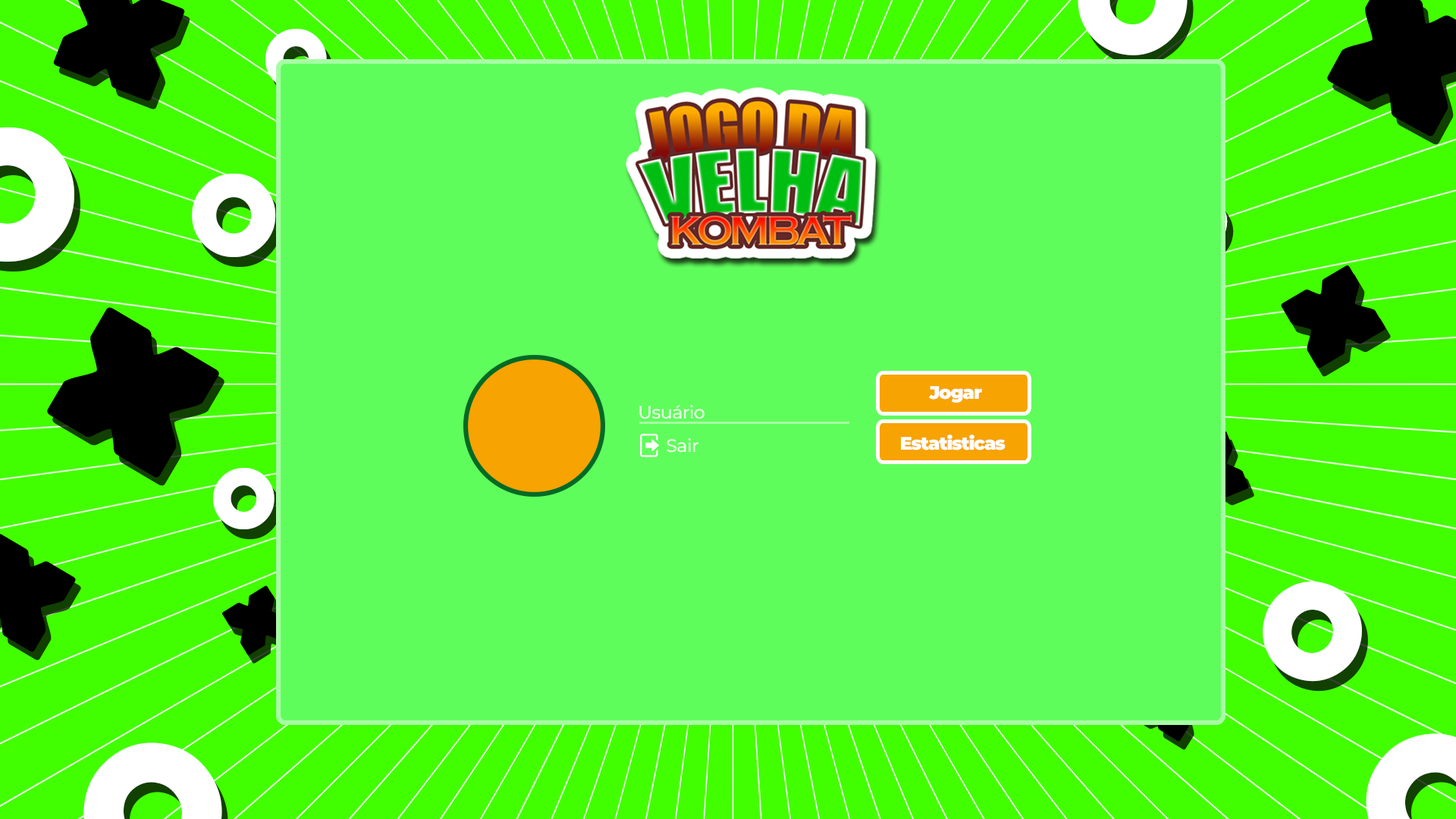
<style>
.page{position:relative;width:1456px;height:819px;background:#5ffd5b}
.page>*{position:absolute;margin:0}
.t1{font:88.2px "Bauhaus93";letter-spacing:-0.025em}
.t2{font:119px "Bauhaus93";letter-spacing:-0.025em;color:#ffffff}
.t3{font:154.7px "BerlinSansFB-Bold";letter-spacing:-0.025em;color:#000000}
.t4{font:256px "BerlinSansFB-Bold";letter-spacing:-0.025em;color:#000000}
.t5{font:18.2px "Montserrat-Black";letter-spacing:-0.05em;color:#ffffff}
.t6{font:18px "Montserrat-Medium";letter-spacing:-0.025em;color:#ffffff}
.t7{font:88.2px "Bauhaus93";letter-spacing:-0.025em;color:#ffffff}
.t8{font:141.5px "Bauhaus93";letter-spacing:-0.025em;color:#ffffff}
.t9{font:104.1px "BerlinSansFB-Bold";letter-spacing:-0.025em;color:#000000}
</style>
<div class="page">
<p class="t1" style="left:265px;top:29px;width:62px;height:61px">O</p>
<p class="t2" style="left:192px;top:174px;width:84px;height:83px">O</p>
<p class="t3" style="left:1281px;top:265px;width:104px;height:104px;rotate:149deg">x</p>
<p class="t4" style="left:47px;top:307px;width:172px;height:171px;rotate:31deg">x</p>
<p class="t5" style="left:929px;top:386px;width:53px;height:17px">Jogar</p>
<p class="t6" style="left:639px;top:405px;width:65px;height:14px;opacity:0.82">Usuário</p>
<p class="t5" style="left:901px;top:435px;width:105px;height:15px">Estatisticas</p>
<p class="t6" style="left:667px;top:438px;width:31px;height:15px;opacity:0.82">Sair</p>
<p class="t7" style="left:213px;top:468px;width:62px;height:61px">O</p>
<p class="t8" style="left:1263px;top:581px;width:99px;height:101px;rotate:-165deg">O</p>
<p class="t9" style="left:221px;top:585px;width:72px;height:70px;rotate:-32deg">x</p>
</div>
